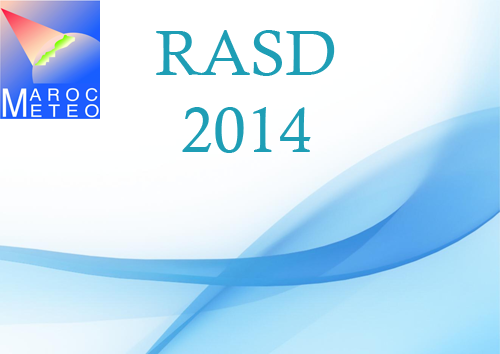
<style>
.page{position:relative;width:500px;height:354px}
.page>*{position:absolute;margin:0}
.t1{font:64px "CalistoMT";color:#1e9eb5}
</style>
<div class="page">
<p class="t1" style="left:156px;top:30px;width:179px;height:123px;text-align:center">RASD<br>2014</p>
</div>
